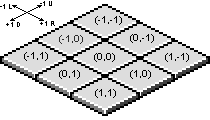
<style>
.page{position:relative;width:210px;height:120px;background:#ffffff}
.page>*{position:absolute;margin:0}
.t1{font:7px "ArialMT";color:#000000}
.t2{font:10px "ArialMT";color:#000000}
.t3{font:10px "ArialMT";color:#2c2c2c}
</style>
<div class="page">
<p class="t1" style="left:0px;top:4px;width:12px;height:5px">-1 L</p>
<p class="t1" style="left:40px;top:1px;width:12px;height:5px">-1 U</p>
<p class="t2" style="left:95px;top:16px;width:27px;height:9px">(-1,-1)</p>
<p class="t1" style="left:6px;top:22px;width:14px;height:5px">+1 D</p>
<p class="t1" style="left:40px;top:21px;width:15px;height:5px">+1 R</p>
<p class="t3" style="left:59px;top:35px;width:24px;height:9px">(-1,0)</p>
<p class="t2" style="left:130px;top:34px;width:24px;height:9px">(0,-1)</p>
<p class="t2" style="left:24px;top:52px;width:24px;height:9px">(-1,1)</p>
<p class="t2" style="left:94px;top:53px;width:21px;height:9px">(0,0)</p>
<p class="t2" style="left:165px;top:53px;width:24px;height:9px">(1,-1)</p>
<p class="t2" style="left:59px;top:70px;width:21px;height:9px">(0,1)</p>
<p class="t2" style="left:130px;top:70px;width:21px;height:9px">(1,0)</p>
<p class="t2" style="left:95px;top:89px;width:21px;height:9px">(1,1)</p>
</div>
